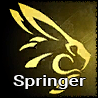
<style>
.page{position:relative;width:98px;height:98px}
.page>*{position:absolute;margin:0}
.t1{font:16px "Roboto-Medium";color:#ffffff;scale:1.2 1}
</style>
<div class="page">
<p class="t1" style="left:13px;top:75px;width:73px;height:14px">Springer</p>
</div>
